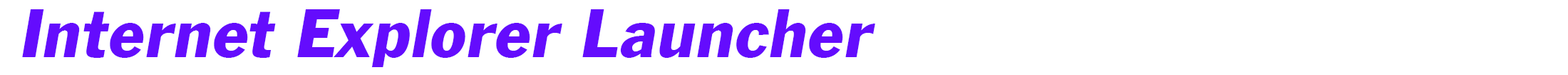
<style>
.page{position:relative;width:1568px;height:75px;background:#ffffff}
.page>*{position:absolute;margin:0}
.t1{font:71.3px "FranklinGothicITALIC";color:#640cfd}
</style>
<div class="page">
<p class="t1" style="left:22px;top:9px;width:853px;height:58px">Internet Explorer Launcher</p>
</div>
